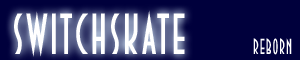
<style>
.page{position:relative;width:300px;height:60px;background:#00003c}
.page>*{position:absolute;margin:0}
.t1{font:57.6px "DecoTechTL";letter-spacing:0.05em;color:#ffffff;scale:0.83 1}
.t2{font:21.6px "DecoTechTL";letter-spacing:0.05em;color:#ffffff;scale:0.83 1}
</style>
<div class="page">
<p class="t1" style="left:14px;top:10px;width:171px;height:47px">switchskate</p>
<p class="t2" style="left:253px;top:38px;width:39px;height:17px">reborn</p>
</div>
